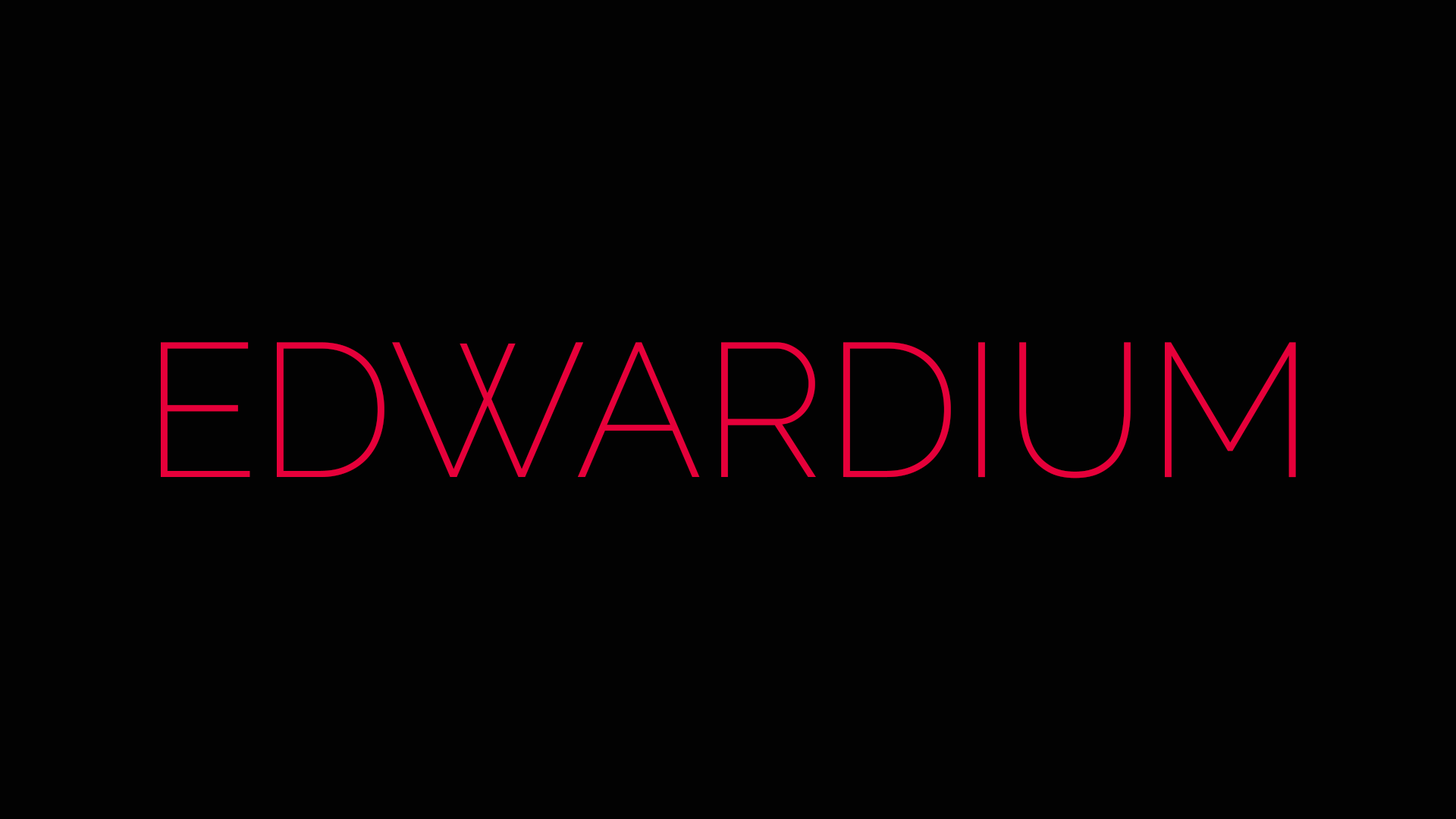
<style>
.page{position:relative;width:1456px;height:819px;background:#020202}
.page>*{position:absolute;margin:0}
.t1{font:189.6px "Raleway-ExtraLight";color:#e6003a}
</style>
<div class="page">
<p class="t1" style="left:161px;top:342px;width:1135px;height:137px">EDWARDIUM</p>
</div>
